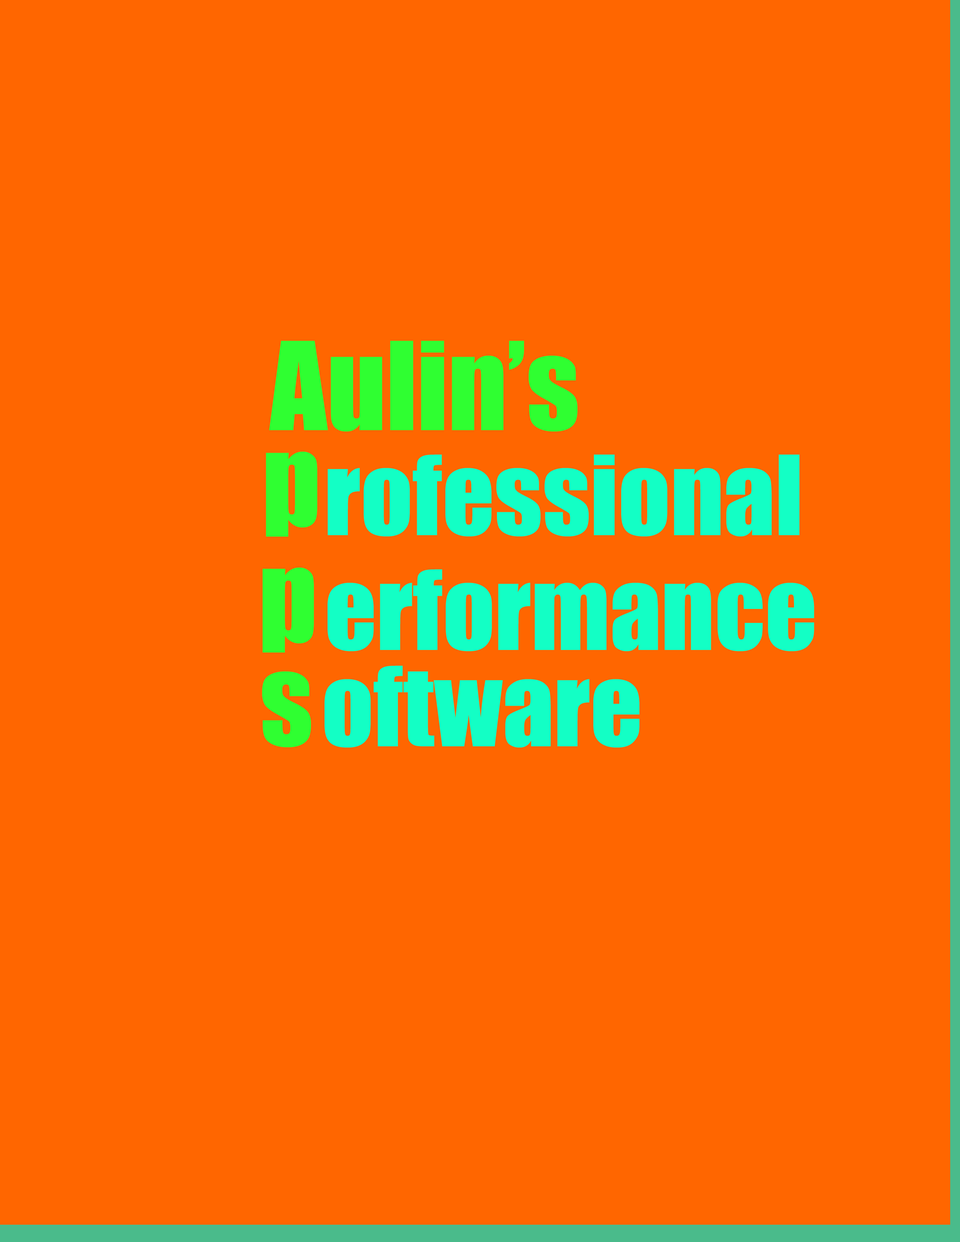
<style>
.page{position:relative;width:960px;height:1242px;background:#ff6600}
.page>*{position:absolute;margin:0}
.t1{font:112.9px "Impact";color:#2fff31}
.t2{font:102px "Impact";color:#13ffc5}
</style>
<div class="page">
<p class="t1" style="left:269px;top:341px;width:308px;height:91px">Aulin’s</p>
<p class="t1" style="left:266px;top:451px;width:51px;height:86px">p</p>
<p class="t1" style="left:262px;top:567px;width:52px;height:86px">p</p>
<p class="t2" style="left:327px;top:569px;width:487px;height:83px">erformance</p>
<p class="t2" style="left:324px;top:666px;width:316px;height:82px">oftware</p>
<p class="t1" style="left:262px;top:671px;width:49px;height:77px">s</p>
</div>
